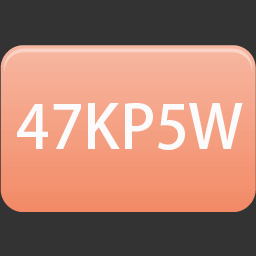
<style>
.page{position:relative;width:256px;height:256px;background:#333333}
.page>*{position:absolute;margin:0}
.t1{font:60px "AdobeHeitiStd-Regular";color:#fbfbfb}
</style>
<div class="page">
<p class="t1" style="left:17px;top:103px;width:226px;height:47px">47KP5W</p>
</div>
